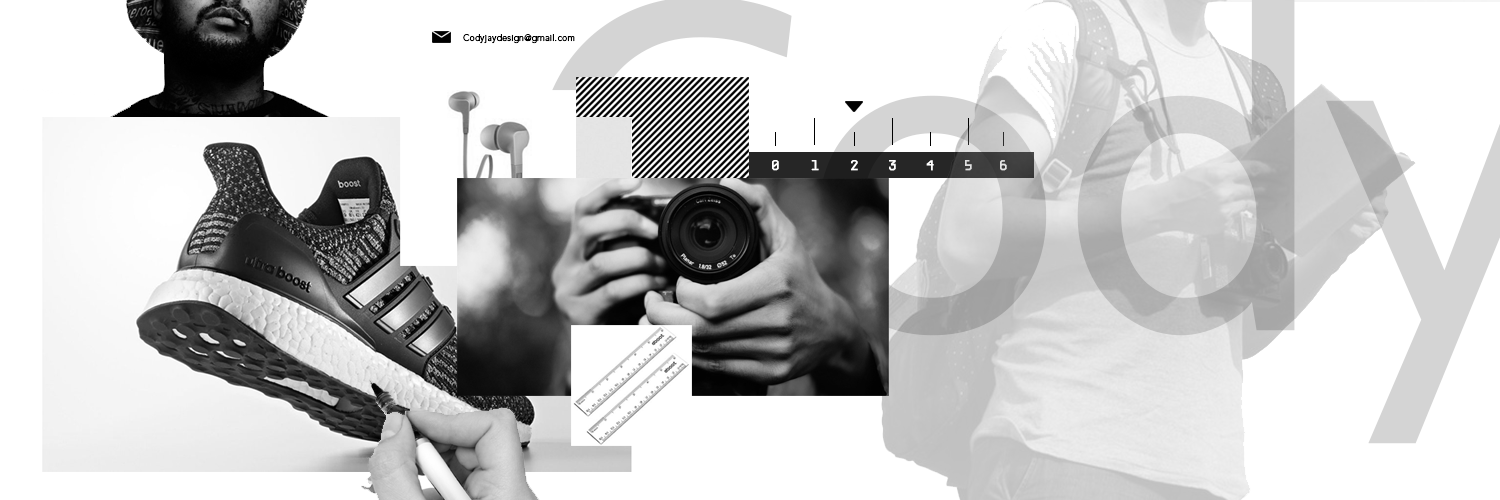
<style>
.page{position:relative;width:1500px;height:500px;background:#ffffff}
.page>*{position:absolute;margin:0}
.t1{font:9.2px "AvenirLTStd-Light";color:#000000;font-weight:bold}
.t2{font:13.9px "Arkitextura-Regular";color:#ffffff;font-weight:bold;scale:1.04 1}
.t3{font:13.9px "Arkitextura-Regular";color:#dfdfdf;font-weight:bold;scale:1.04 1}
.t4{font:13.9px "Arkitextura-Regular";color:#e5e5e5;font-weight:bold;scale:1.04 1}
</style>
<div class="page">
<p class="t1" style="left:463px;top:34px;width:112px;height:10px">Codyjaydesign@gmail.com</p>
<p class="t2" style="left:772px;top:160px;width:7px;height:11px">0</p>
<p class="t2" style="left:811px;top:160px;width:8px;height:11px">1</p>
<p class="t2" style="left:851px;top:160px;width:7px;height:11px">2</p>
<p class="t2" style="left:889px;top:160px;width:7px;height:11px">3</p>
<p class="t2" style="left:926px;top:160px;width:8px;height:11px">4</p>
<p class="t3" style="left:965px;top:160px;width:7px;height:11px">5</p>
<p class="t4" style="left:1000px;top:160px;width:7px;height:11px">6</p>
</div>
